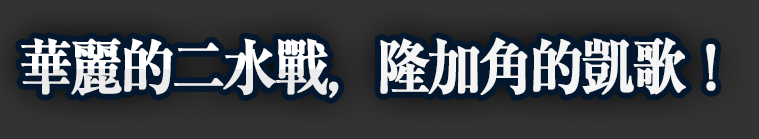
<style>
.page{position:relative;width:759px;height:139px}
.page>*{position:absolute;margin:0}
.t1{font:60px "RyuminPro-Bold";letter-spacing:-0.08em;color:#ffffff;font-weight:bold;scale:0.9 1}
</style>
<div class="page">
<p class="t1" style="left:21px;top:37px;width:695px;height:61px">華麗的二水戰，隆加角的凱歌！</p>
</div>
